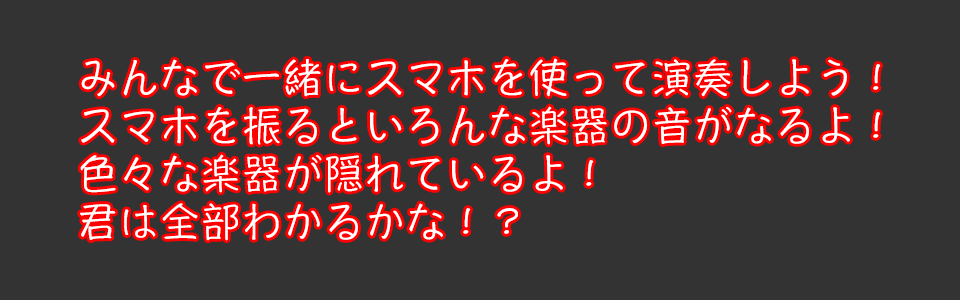
<style>
.page{position:relative;width:960px;height:300px;background:#333333}
.page>*{position:absolute;margin:0}
.t1{font:40px/48px "HannotateSC-W5";letter-spacing:0.025em;color:#ffffff}
</style>
<div class="page">
<p class="t1" style="left:80px;top:58px;width:801px;height:183px">みんなで一緒にスマホを使って演奏しよう！<br>スマホを振るといろんな楽器の音がなるよ！<br>色々な楽器が隠れているよ！<br>君は全部わかるかな！？</p>
</div>
